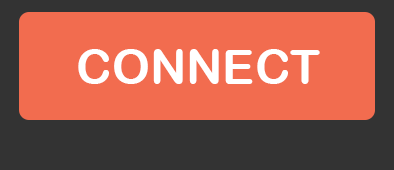
<style>
.page{position:relative;width:394px;height:170px;background:#f26c4f}
.page>*{position:absolute;margin:0}
.t1{font:48px "ArialRoundedMTBold";color:#ffffff}
</style>
<div class="page">
<p class="t1" style="left:78px;top:49px;width:242px;height:35px">CONNECT</p>
</div>
